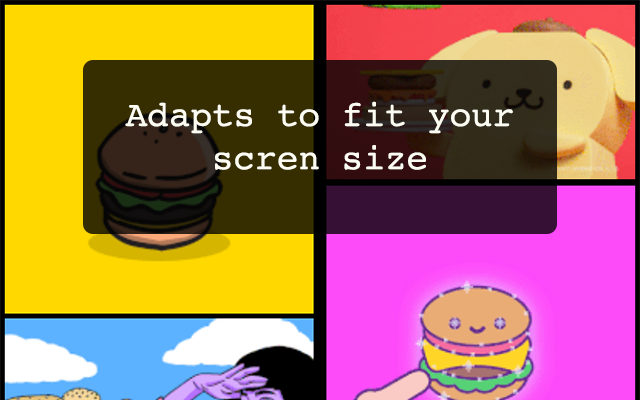
<style>
.page{position:relative;width:640px;height:400px}
.page>*{position:absolute;margin:0}
.t1{font:36px "Courier";color:#fcfcf2}
</style>
<div class="page">
<p class="t1" style="left:125px;top:101px;width:388px;height:69px;text-align:center">Adapts to fit your scren size</p>
</div>
